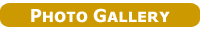
<style>
.page{position:relative;width:200px;height:30px;background:#cc9900}
.page>*{position:absolute;margin:0}
.t1{font:17.9px "TahomaSmallCap-Bold";color:#ffffff}
</style>
<div class="page">
<p class="t1" style="left:31px;top:8px;width:139px;height:15px">Photo Gallery</p>
</div>
